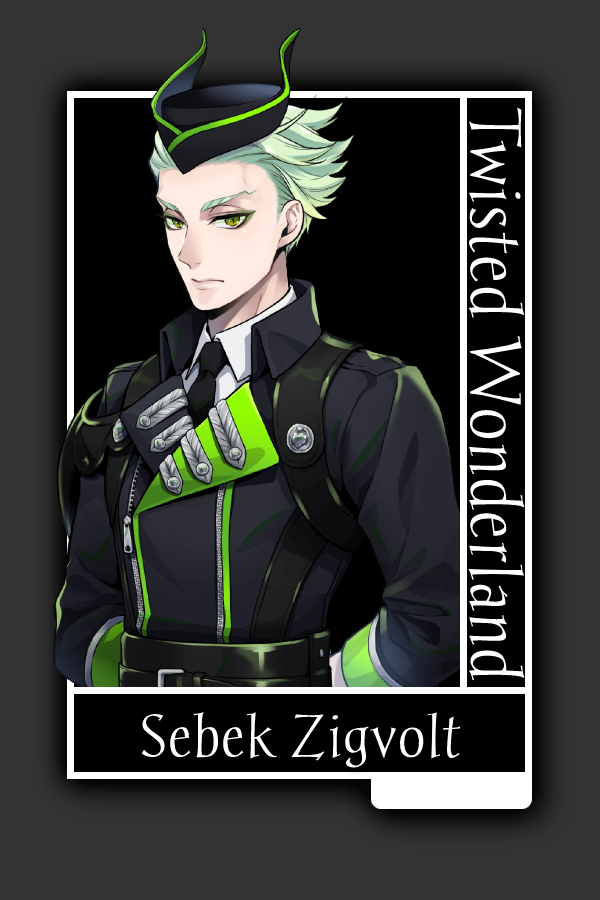
<style>
.page{position:relative;width:600px;height:900px;background:#333333}
.page>*{position:absolute;margin:0}
.t1{font:60px "Chantelli-Antiqua";color:#ffffff}
.t2{font:50px "Chantelli-Antiqua";color:#ffffff}
</style>
<div class="page">
<p class="t1" style="left:468px;top:107px;width:57px;height:574px;rotate:90deg">Twisted Wonderland</p>
<p class="t2" style="left:141px;top:712px;width:320px;height:56px">Sebek Zigvolt</p>
</div>
